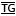
<style>
.page{position:relative;width:16px;height:16px;background:#ffffff}
.page>*{position:absolute;margin:0}
.t1{font:11px "NotoSans";color:#000000}
</style>
<div class="page">
<p class="t1" style="left:1px;top:4px;width:14px;height:8px">TG</p>
</div>
